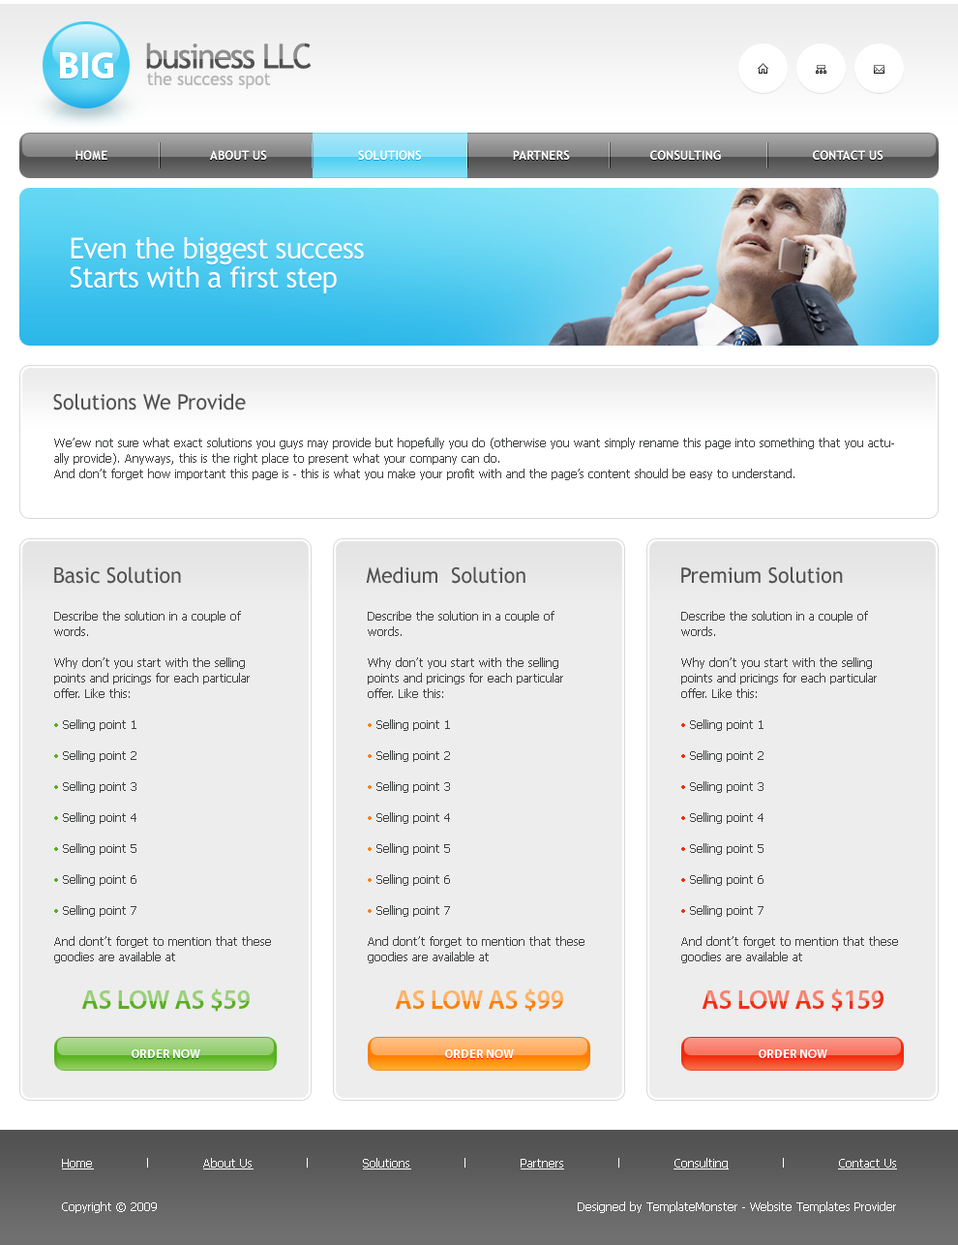
<style>
.page{position:relative;width:958px;height:1245px;background:#ededed}
.page>*{position:absolute;margin:0}
.t1{font:33.9px "TrebuchetMS";letter-spacing:-0.05em}
.t2{font:17.4px "TrebuchetMS";color:#b7b7b7}
.t3{font:12.6px "TrebuchetMS-Bold";color:#ffffff;scale:0.96 1}
.t4{font:29px/29px "TrebuchetMS";letter-spacing:-0.025em;color:#ffffff}
.t5{font:21.3px "TrebuchetMS";color:#515151}
.t6{font:11.6px/15.5px "Tahoma";color:#404141}
.t7{font:11.6px/15.5px "Tahoma";color:#58b01f}
.t8{font:11.6px/15.5px "Tahoma";color:#ff8002}
.t9{font:11.6px/15.5px "Tahoma";color:#f32e10}
.t10{font:27.1px "MyriadPro-Semibold";letter-spacing:-0.025em;text-transform:uppercase}
.t11{font:12.6px "MyriadPro-Bold";color:#ffffff;text-transform:uppercase;scale:0.96 1}
.t12{font:11.6px "Tahoma";color:#ffffff;text-decoration:underline}
.t13{font:11.6px "Tahoma";color:#ffffff}
</style>
<div class="page">
<p class="t1" style="left:146px;top:43px;width:166px;height:26px">business LLC</p>
<p class="t2" style="left:147px;top:72px;width:124px;height:17px">the success spot</p>
<p class="t3" style="left:75px;top:150px;width:809px;height:10px">HOME                            ABOUT US                         SOLUTIONS                         PARTNERS                      CONSULTING                         CONTACT US</p>
<p class="t4" style="left:70px;top:237px;width:294px;height:57px">Even the biggest success<br>Starts with a first step</p>
<p class="t5" style="left:53px;top:393px;width:193px;height:17px">Solutions We Provide</p>
<p class="t6" style="left:54px;top:437px;width:840px;height:43px">We’ew not sure what exact solutions you guys may provide but hopefully you do (otherwise you want simply rename this page into something that you actually provide). Anyways, this is the right place to present what your company can do.<br>And don’t forget how important this page is - this is what you make your profit with and the page’s content should be easy to understand.</p>
<p class="t5" style="left:54px;top:566px;width:127px;height:18px">Basic Solution</p>
<p class="t5" style="left:366px;top:566px;width:160px;height:18px">Medium  Solution</p>
<p class="t5" style="left:681px;top:566px;width:162px;height:18px">Premium Solution</p>
<p class="t6" style="left:54px;top:611px;width:217px;height:352px">Describe the solution in a couple of words.<br><br>Why don’t you start with the selling points and pricings for each particular offer. Like this:<br><br><span class="t7">• </span>Selling point 1<br><br><span class="t7">• </span>Selling point 2<br><br><span class="t7">• </span>Selling point 3<br><br><span class="t7">• </span>Selling point 4<br><br><span class="t7">• </span>Selling point 5<br><br><span class="t7">• </span>Selling point 6<br><br><span class="t7">• </span>Selling point 7<br><br>And dont’t forget to mention that these goodies are available at</p>
<p class="t6" style="left:368px;top:611px;width:217px;height:352px">Describe the solution in a couple of words.<br><br>Why don’t you start with the selling points and pricings for each particular offer. Like this:<br><br><span class="t8">• </span>Selling point 1<br><br><span class="t8">• </span>Selling point 2<br><br><span class="t8">• </span>Selling point 3<br><br><span class="t8">• </span>Selling point 4<br><br><span class="t8">• </span>Selling point 5<br><br><span class="t8">• </span>Selling point 6<br><br><span class="t8">• </span>Selling point 7<br><br>And dont’t forget to mention that these goodies are available at</p>
<p class="t6" style="left:681px;top:611px;width:217px;height:352px">Describe the solution in a couple of words.<br><br>Why don’t you start with the selling points and pricings for each particular offer. Like this:<br><br><span class="t9">• </span>Selling point 1<br><br><span class="t9">• </span>Selling point 2<br><br><span class="t9">• </span>Selling point 3<br><br><span class="t9">• </span>Selling point 4<br><br><span class="t9">• </span>Selling point 5<br><br><span class="t9">• </span>Selling point 6<br><br><span class="t9">• </span>Selling point 7<br><br>And dont’t forget to mention that these goodies are available at</p>
<p class="t10" style="left:81px;top:988px;width:169px;height:23px">As Low as $59</p>
<p class="t10" style="left:395px;top:988px;width:168px;height:23px">As Low as $99</p>
<p class="t10" style="left:702px;top:988px;width:182px;height:23px">As Low as $159</p>
<p class="t11" style="left:132px;top:1049px;width:68px;height:9px">Order now</p>
<p class="t11" style="left:445px;top:1049px;width:69px;height:9px">Order now</p>
<p class="t11" style="left:759px;top:1049px;width:68px;height:9px">Order now</p>
<p class="t12" style="left:62px;top:1157px;width:835px;height:12px">Home<span class="t13">              l              </span>About Us<span class="t13">              l              </span>Solutions<span class="t13">              l              </span>Partners<span class="t13">              l              </span>Consulting<span class="t13">              l              </span>Contact Us</p>
<p class="t13" style="left:62px;top:1201px;width:95px;height:12px">Copyright © 2009</p>
<p class="t13" style="left:578px;top:1201px;width:318px;height:12px">Designed by TemplateMonster - Website Templates Provider</p>
</div>
